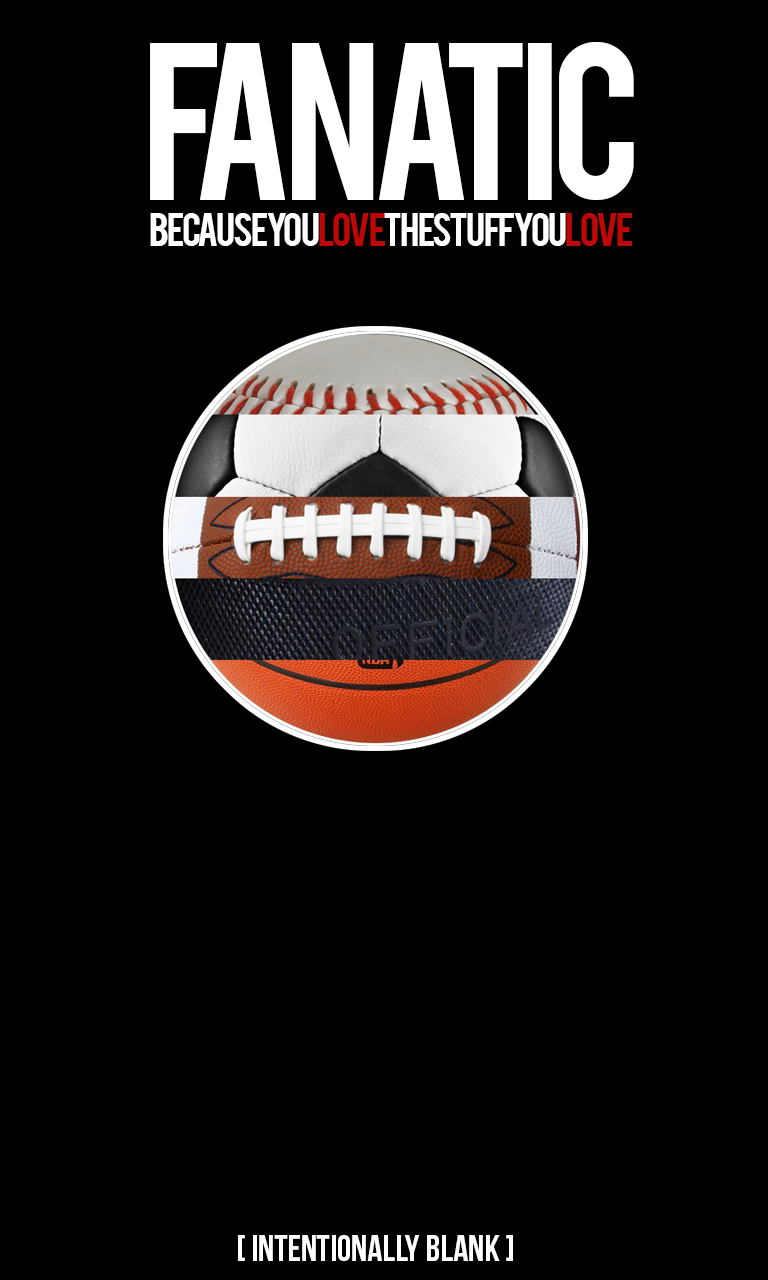
<style>
.page{position:relative;width:768px;height:1280px;background:#000000}
.page>*{position:absolute;margin:0}
.t1{font:175px "Bebas";letter-spacing:-0.075em;color:#ffffff}
.t2{font:37px "Bebas";letter-spacing:-0.075em;color:#ffffff}
.t3{font:37px "Bebas";letter-spacing:-0.075em;color:#be0808}
.t4{font:37px "BebasNeue";color:#ffffff}
</style>
<div class="page">
<p class="t1" style="left:150px;top:42px;width:484px;height:158px">FANATIC</p>
<p class="t2" style="left:150px;top:213px;width:482px;height:33px">BECAUSEYOU<span class="t3">LOVE</span>THESTUFFYOU<span class="t3">LOVE</span></p>
<p class="t4" style="left:238px;top:1235px;width:275px;height:26px">[ INTENTIONALLY BLANK ]</p>
</div>
